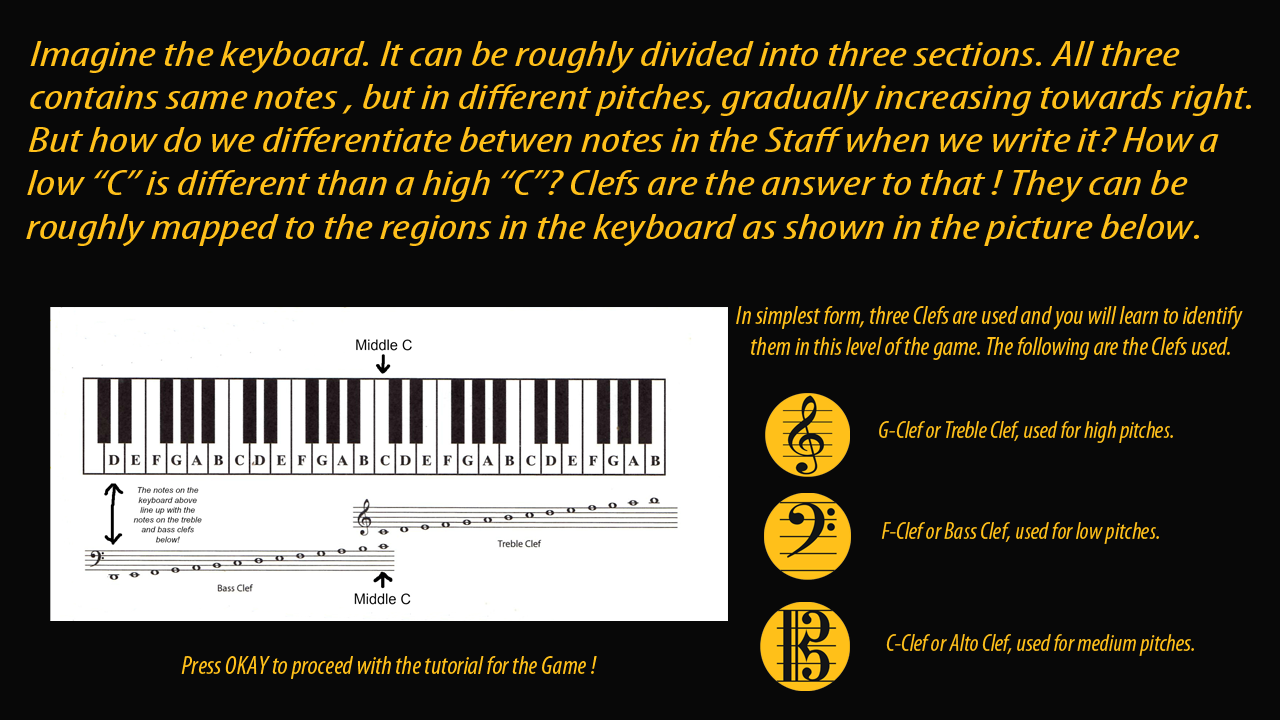
<style>
.page{position:relative;width:1280px;height:720px;background:#080808}
.page>*{position:absolute;margin:0}
.t1{font:36px "MyriadPro-CondIt";color:#ffc01a;scale:1.42 1}
.t2{font:26px "MyriadPro-CondIt";color:#ffc01a}
.t3{font:24px "MyriadPro-CondIt";color:#ffc01a}
</style>
<div class="page">
<p class="t1" style="left:26px;top:41px;width:1225px;height:206px">Imagine the keyboard. It can be roughly divided into three sections. All three<br>contains same notes , but in different pitches, gradually increasing towards right.<br>But how do we differentiate betwen notes in the Staff when we write it? How a <br>low “C” is different than a high “C”? Clefs are the answer to that ! They can be <br>roughly mapped to the regions in the keyboard as shown in the picture below.</p>
<p class="t2" style="left:736px;top:306px;width:507px;height:54px;text-align:center">In simplest form, three Clefs are used and you will learn to identify<br> them in this level of the game. The following are the Clefs used.</p>
<p class="t3" style="left:879px;top:421px;width:294px;height:22px">G-Clef or Treble Clef, used for high pitches.</p>
<p class="t3" style="left:881px;top:522px;width:278px;height:22px">F-Clef or Bass Clef, used for low pitches.</p>
<p class="t3" style="left:886px;top:634px;width:308px;height:22px">C-Clef or Alto Clef, used for medium pitches.</p>
<p class="t2" style="left:181px;top:656px;width:416px;height:23px">Press OKAY to proceed with the tutorial for the Game !</p>
</div>
